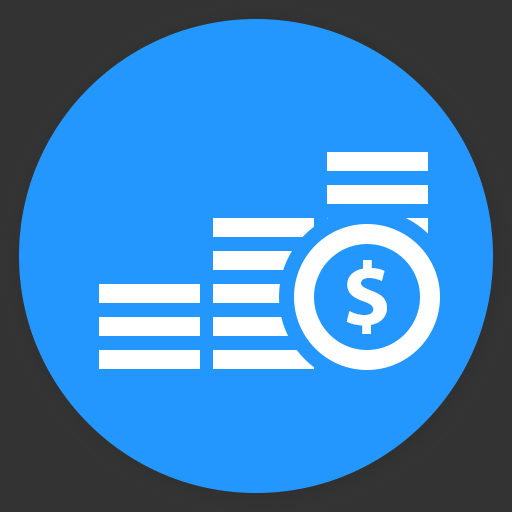
<style>
.page{position:relative;width:512px;height:512px;background:#2497ff}
.page>*{position:absolute;margin:0}
.t1{font:90px "MyriadPro-Bold";color:#ffffff}
</style>
<div class="page">
<p class="t1" style="left:346px;top:260px;width:41px;height:74px">$</p>
</div>
